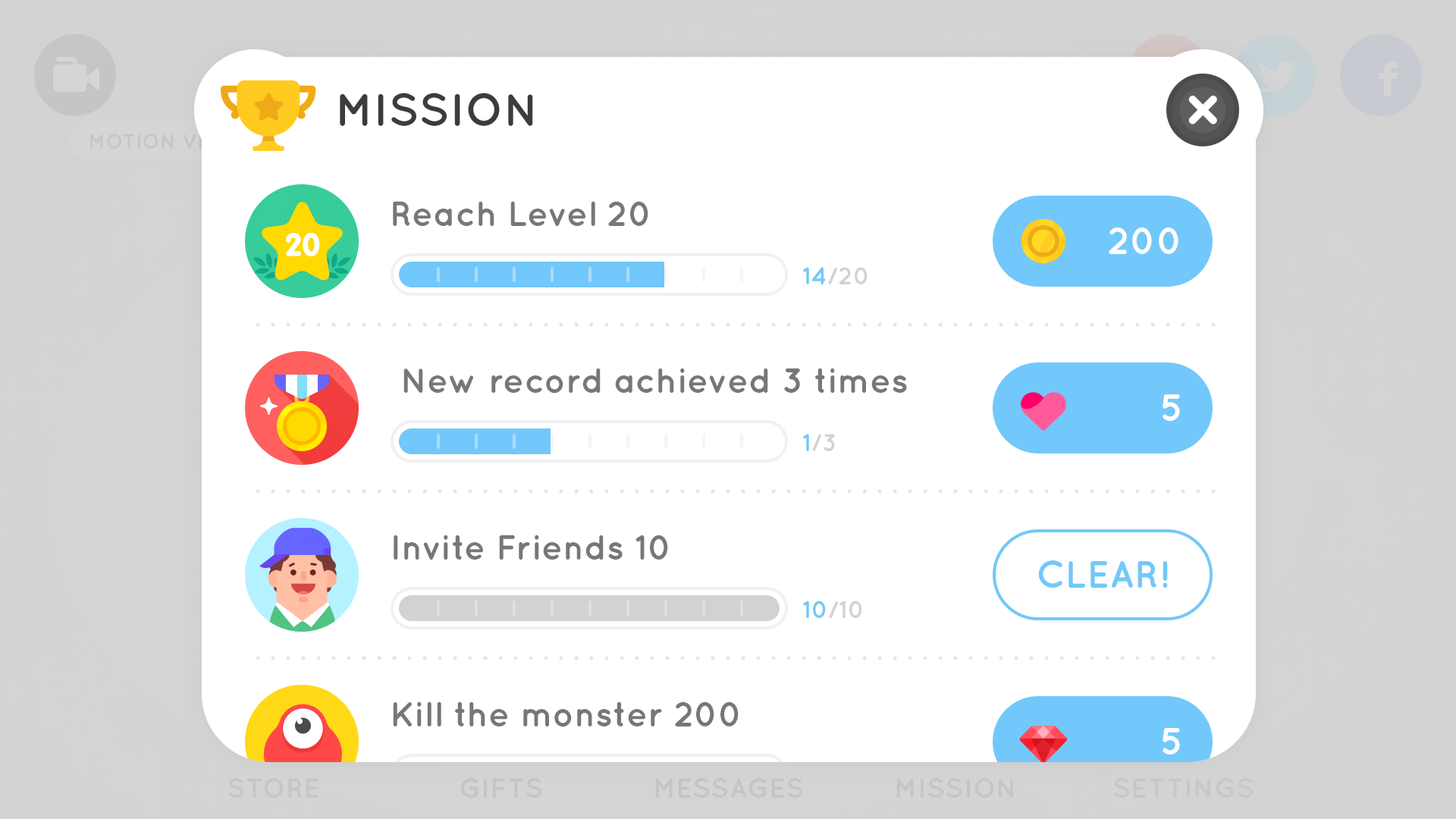
<style>
.page{position:relative;width:1456px;height:819px;background:#ffffff}
.page>*{position:absolute;margin:0}
.t1{font:45.5px "Quicksand-Bold";color:#3c3c3c;text-transform:uppercase}
.t2{font:34.9px "Quicksand-Bold";color:#777777}
.t3{font:30px "BPreplay-Bold";letter-spacing:-0.01em;color:#ffffff;scale:1.05 1}
.t4{font:37.9px "Quicksand-Bold";color:#ffffff}
.t5{font:24.3px "Quicksand-Bold";color:#d2d2d2}
.t6{font:24.3px "Quicksand-Bold";color:#72c8fa}
.t7{font:37.9px "Quicksand-Bold";color:#72c8fa}
</style>
<div class="page">
<p class="t1" style="left:340px;top:93px;width:193px;height:33px">Mission</p>
<p class="t2" style="left:393px;top:201px;width:255px;height:25px">Reach Level 20</p>
<p class="t3" style="left:286px;top:233px;width:34px;height:23px">20</p>
<p class="t4" style="left:1109px;top:227px;width:69px;height:27px">200</p>
<p class="t5" style="left:803px;top:267px;width:65px;height:17px"><span class="t6">14</span>/20</p>
<p class="t2" style="left:403px;top:368px;width:504px;height:26px">New record achieved 3 times</p>
<p class="t4" style="left:1163px;top:394px;width:17px;height:27px">5</p>
<p class="t5" style="left:803px;top:434px;width:32px;height:17px"><span class="t6">1</span>/3</p>
<p class="t2" style="left:394px;top:535px;width:274px;height:25px">Invite Friends 10</p>
<p class="t7" style="left:1038px;top:560px;width:130px;height:28px">CLEAR!</p>
<p class="t5" style="left:803px;top:601px;width:59px;height:17px"><span class="t6">10</span>/10</p>
<p class="t2" style="left:393px;top:701px;width:346px;height:26px">Kill the monster 200</p>
<p class="t4" style="left:1163px;top:728px;width:17px;height:27px">5</p>
</div>
